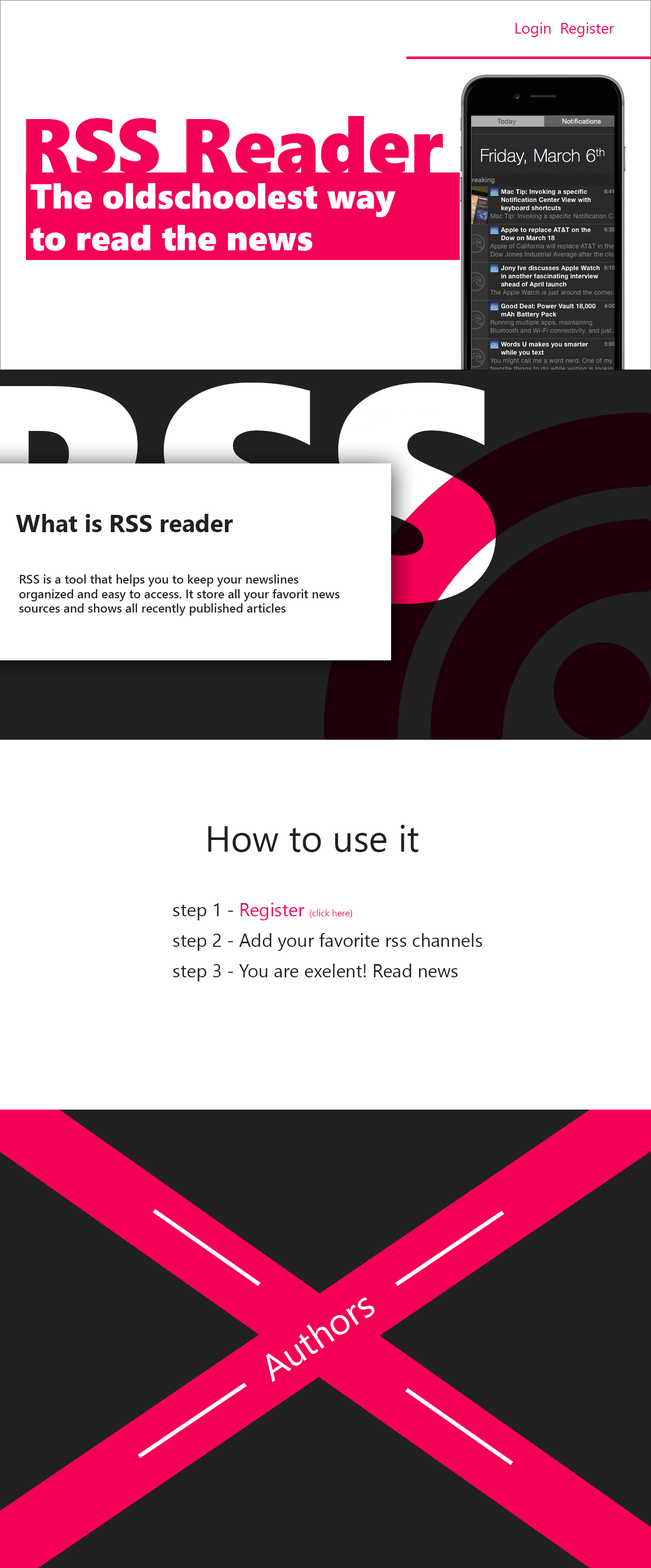
<style>
.page{position:relative;width:651px;height:1568px;background:#ffffff}
.page>*{position:absolute;margin:0}
.t1{font:15.3px "SegoeUI";color:#f50057}
.t2{font:76.3px "SegoeUIBlack";color:#f50057}
.t3{font:34.6px "SegoeUIBlack";color:#ffffff}
.t4{font:24.4px "SegoeUI-Bold";color:#212121}
.t5{font:12.2px "SegoeUI-Semibold";color:#212121}
.t6{font:36.6px "SegoeUI";color:#212121}
.t7{font:18.3px/30.5px "SegoeUI";color:#212121}
.t8{font:18.3px/30.5px "SegoeUI";color:#f50057}
.t9{font:9.2px/30.5px "SegoeUI";color:#f50057}
.t10{font:36.6px "SegoeUI";color:#ffffff}
</style>
<div class="page">
<p class="t1" style="left:515px;top:22px;width:100px;height:15px">Login  Register</p>
<p class="t2" style="left:26px;top:116px;width:417px;height:57px">RSS Reader</p>
<p class="t3" style="left:30px;top:183px;width:366px;height:68px">The oldschoolest way<br>to read the news</p>
<p class="t4" style="left:16px;top:514px;width:217px;height:18px">What is RSS reader</p>
<p class="t5" style="left:19px;top:574px;width:321px;height:42px">RSS is a tool that helps you to keep your newslines<br>organized and easy to access. It store all your favorit news sources and shows all recently published articles</p>
<p class="t6" style="left:208px;top:825px;width:211px;height:27px">How to use it</p>
<p class="t7" style="left:173px;top:903px;width:309px;height:78px">step 1 - <span class="t8">Register </span><span class="t9">(click here) <br></span>step 2 - Add your favorite rss channels step 3 - You are exelent! Read news</p>
<p class="t10" style="left:266px;top:1297px;width:108px;height:85px;rotate:-34deg">Authors</p>
</div>
